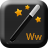
<style>
.page{position:relative;width:48px;height:48px}
.page>*{position:absolute;margin:0}
.t1{font:10px "MyriadPro-Regular";color:#e2940d}
</style>
<div class="page">
<p class="t1" style="left:26px;top:33px;width:16px;height:7px">Ww</p>
</div>
